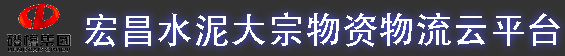
<style>
.page{position:relative;width:565px;height:56px;background:#333333}
.page>*{position:absolute;margin:0}
.t1{font:37px "AdobeHeitiStd-Regular";color:#ffffff}
</style>
<div class="page">
<p class="t1" style="left:85px;top:12px;width:475px;height:35px">宏昌水泥大宗物资物流云平台</p>
</div>
